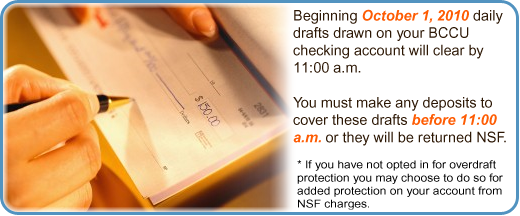
<style>
.page{position:relative;width:520px;height:216px;background:#ffffff}
.page>*{position:absolute;margin:0}
.t1{font:14.5px "ArialMT";color:#2d1805}
.t2{font:14.5px "Arial-BoldItalicMT";color:#fe5c03}
.t3{font:10.9px "ArialMT";color:#000000;scale:1.1 1}
</style>
<div class="page">
<p class="t1" style="left:293px;top:9px;width:213px;height:137px">Beginning <span class="t2">October 1, 2010 </span>daily drafts drawn on your BCCU checking account will clear by 11:00 a.m. <br> <br>You must make any deposits to cover these drafts <span class="t2">before 11:00 a.m. </span>or they will be returned NSF.</p>
<p class="t3" style="left:297px;top:160px;width:206px;height:50px">* If you have not opted in for overdraft <br>protection you may choose to do so for <br>added protection on your account from <br>NSF charges.</p>
</div>
